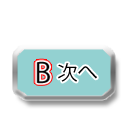
<style>
.page{position:relative;width:128px;height:128px;background:#ffffff}
.page>*{position:absolute;margin:0}
.t1{font:20.2px "KozGoPr6N-Regular";color:#000000}
</style>
<div class="page">
<p class="t1" style="left:58px;top:63px;width:39px;height:19px">次へ</p>
</div>
